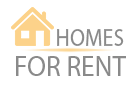
<style>
.page{position:relative;width:140px;height:100px;background:#ffffff}
.page>*{position:absolute;margin:0}
.t1{font:24.8px "MyriadPro-Regular";color:#8a8a8a;scale:0.89 1}
.t2{font:29.1px "MyriadPro-Regular";color:#8a8a8a;scale:0.94 1}
</style>
<div class="page">
<p class="t1" style="left:57px;top:29px;width:67px;height:17px">HOMES</p>
<p class="t2" style="left:16px;top:56px;width:110px;height:20px">FOR RENT</p>
</div>
